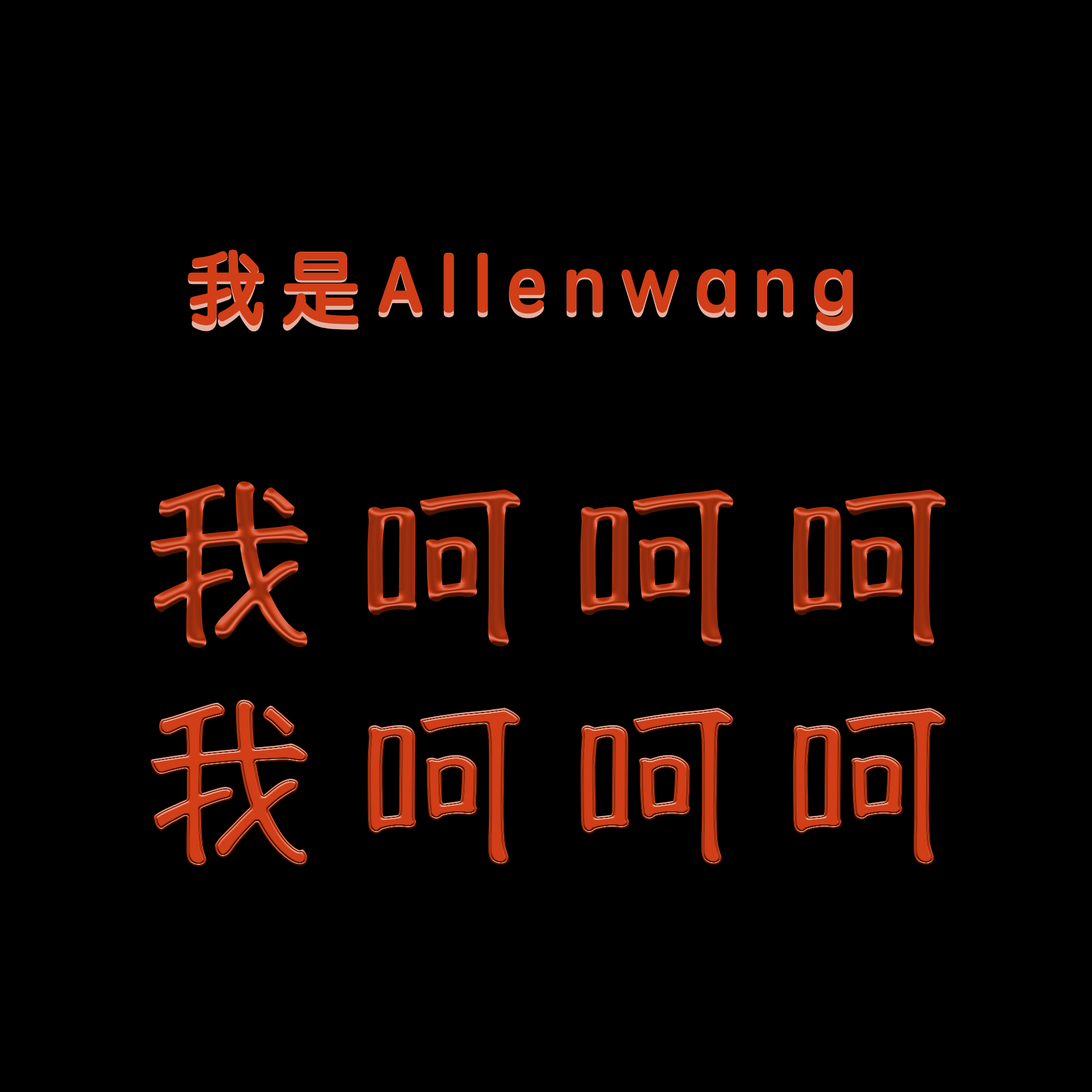
<style>
.page{position:relative;width:1092px;height:1092px;background:#000000}
.page>*{position:absolute;margin:0}
.t1{font:84.5px "STYuanti-TC-Bold";letter-spacing:0.2em;color:#d13e17;scale:0.93 1}
.t2{font:78.6px "STYuanti-TC-Bold";letter-spacing:0.2em;color:#d13e17}
.t3{font:177.2px "HannotateSC-W7";letter-spacing:0.2em}
.t4{font:177.2px "HannotateSC-W7";letter-spacing:0.2em;color:#d13e17}
</style>
<div class="page">
<p class="t1" style="left:188px;top:250px;width:665px;height:81px">我是Allenwang</p>
<p class="t2" style="left:188px;top:250px;width:665px;height:76px">我是Allenwang</p>
<p class="t3" style="left:150px;top:481px;width:796px;height:167px">我呵呵呵</p>
<p class="t4" style="left:150px;top:699px;width:796px;height:167px">我呵呵呵</p>
</div>
